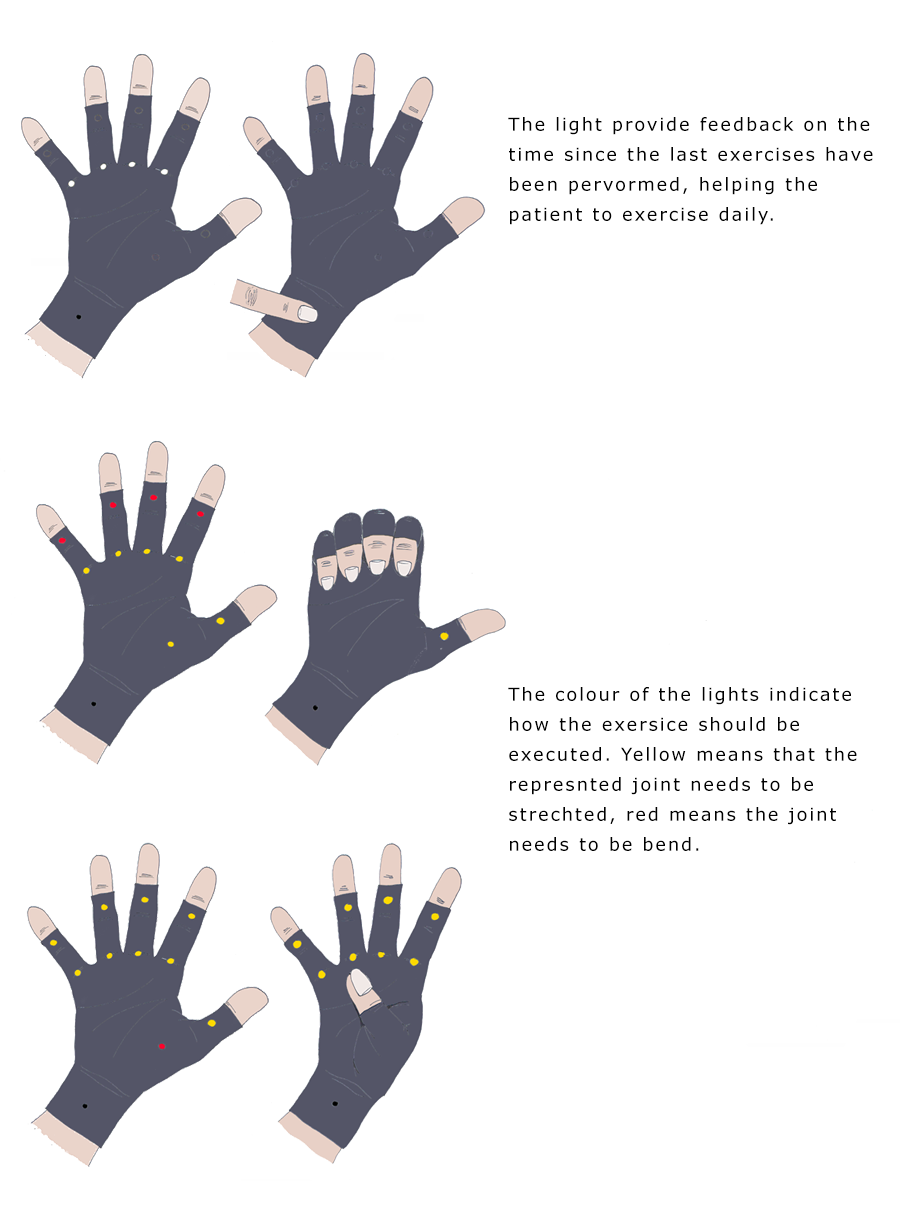
<style>
.page{position:relative;width:900px;height:1210px;background:#ffffff}
.page>*{position:absolute;margin:0}
.t1{font:18px/30px "Verdana";letter-spacing:0.1em;color:#000000}
</style>
<div class="page">
<p class="t1" style="left:508px;top:117px;width:365px;height:734px">The light provide feedback on the time since the last exercises have been pervormed, helping the patient to exercise daily.<br><br><br><br><br><br><br><br><br><br><br><br><br><br><br><br>The colour of the lights indicate how the exersice should be executed. Yellow means that the represnted joint needs to be strechted, red means the joint needs to be bend.</p>
</div>
